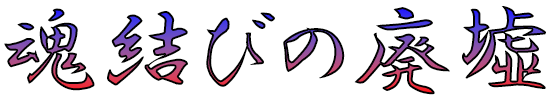
<style>
.page{position:relative;width:550px;height:100px;background:#ffffff}
.page>*{position:absolute;margin:0}
.t1{font:100px "HGPGyoshotai"}
</style>
<div class="page">
<p class="t1" style="left:4px;top:6px;width:542px;height:89px">魂結びの廃墟</p>
</div>
